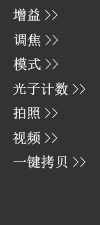
<style>
.page{position:relative;width:100px;height:225px;background:#333333}
.page>*{position:absolute;margin:0}
.t1{font:14px "SimSun";color:#ffffff}
</style>
<div class="page">
<p class="t1" style="left:13px;top:8px;width:45px;height:14px">增益&gt;&gt;</p>
<p class="t1" style="left:13px;top:33px;width:45px;height:14px">调焦&gt;&gt;</p>
<p class="t1" style="left:13px;top:57px;width:45px;height:14px">模式&gt;&gt;</p>
<p class="t1" style="left:13px;top:82px;width:73px;height:14px">光子计数&gt;&gt;</p>
<p class="t1" style="left:13px;top:107px;width:45px;height:12px">拍照&gt;&gt;</p>
<p class="t1" style="left:13px;top:131px;width:45px;height:14px">视频&gt;&gt;</p>
<p class="t1" style="left:13px;top:155px;width:73px;height:14px">一键拷贝&gt;&gt;</p>
</div>
